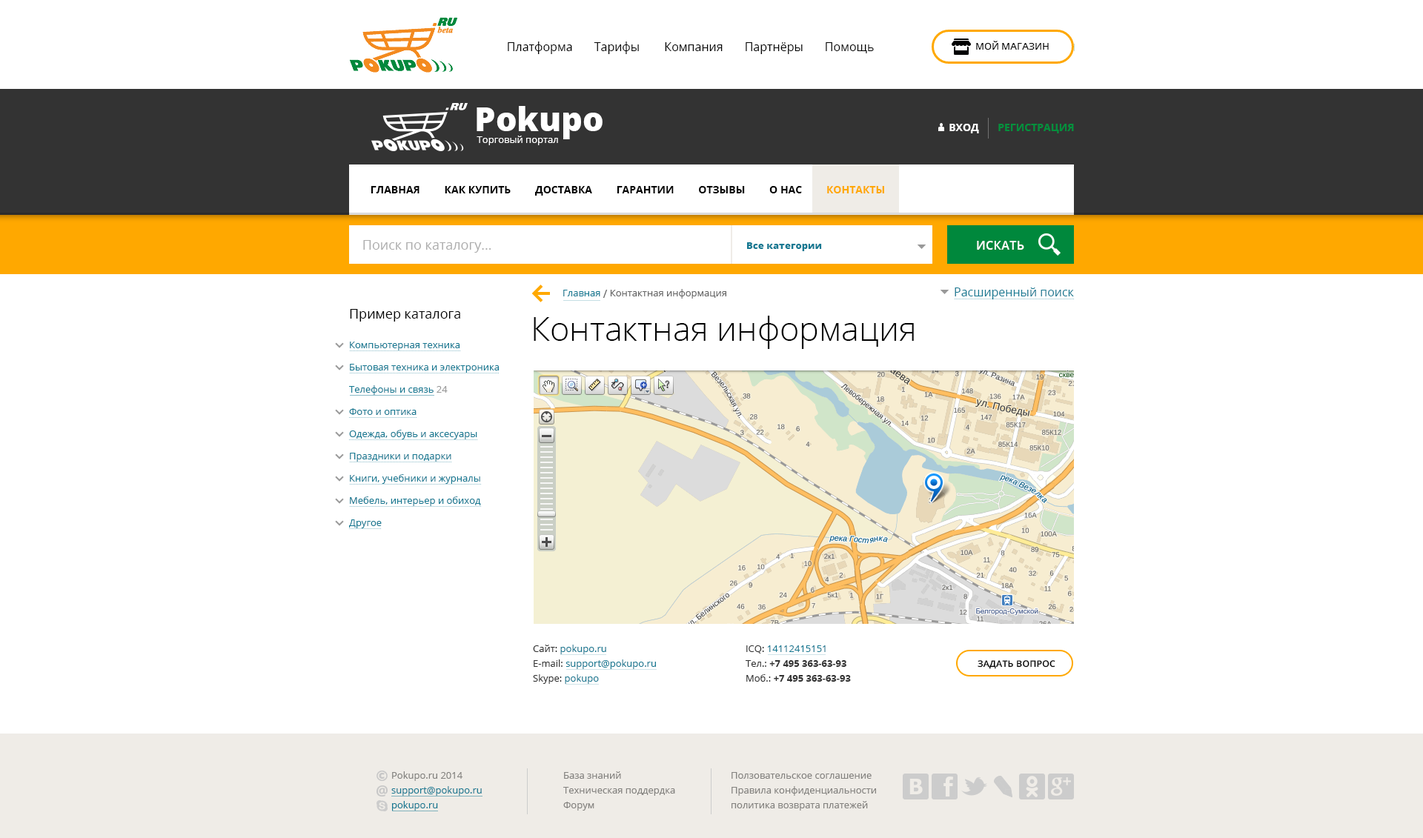
<style>
.page{position:relative;width:1423px;height:838px;background:#ffffff}
.page>*{position:absolute;margin:0}
.t1{font:11.9px "OpenSans";color:#010101}
.t2{font:9.6px "OpenSans";color:#ffffff}
.t3{font:33.3px "OpenSans-Extrabold";color:#ffffff}
.t4{font:10.4px "OpenSans-Bold";color:#02903d;text-transform:uppercase}
.t5{font:10.4px "OpenSans-Bold";color:#ffffff;text-transform:uppercase}
.t6{font:10.4px "OpenSans-Bold";color:#000000;text-transform:uppercase}
.t7{font:10.4px "OpenSans-Bold";color:#ffa800;text-transform:uppercase}
.t8{font:13.3px "OpenSans";color:#adadad}
.t9{font:9.6px "OpenSans-Extrabold";color:#177a93}
.t10{font:11.9px "OpenSans-Semibold";letter-spacing:0.025em;color:#ffffff;text-transform:uppercase}
.t11{font:9.6px "OpenSans";color:#666666}
.t12{font:9.6px "OpenSans";color:#177a93}
.t13{font:11.1px "OpenSans";color:#666666}
.t14{font:11.9px "OpenSans";color:#177a93}
.t15{font:13.3px "OpenSans";color:#000000}
.t16{font:33.3px "OpenSans-Light";color:#000000}
.t17{font:9.6px/22.2px "OpenSans";color:#177a93}
.t18{font:9.6px/22.2px "OpenSans";color:#999999}
.t19{font:9.6px/14.8px "OpenSans";color:#177a93}
.t20{font:9.6px/14.8px "OpenSans";color:#333333}
.t21{font:9.6px/14.8px "OpenSans-Bold";color:#333333}
.t22{font:8.9px "OpenSans-Semibold";letter-spacing:0.025em;color:#000000;text-transform:uppercase}
</style>
<div class="page">
<p class="t1" style="left:508px;top:41px;width:366px;height:13px">Платформа       Тарифы        Компания       Партнёры       Помощь</p>
<p class="t2" style="left:476px;top:106px;width:126px;height:39px"><span class="t3">Pokupo<br> </span>Торговый портал</p>
<p class="t4" style="left:949px;top:124px;width:125px;height:9px"><span class="t5">Вход       </span>регистрация</p>
<p class="t6" style="left:371px;top:186px;width:513px;height:10px">ГЛАВНАЯ         Как купить         Доставка         Гарантии         Отзывы         О нас         <span class="t7">Контакты</span></p>
<p class="t8" style="left:363px;top:240px;width:128px;height:13px">Поиск по каталогу...</p>
<p class="t9" style="left:747px;top:242px;width:75px;height:9px">Все категории</p>
<p class="t10" style="left:977px;top:241px;width:47px;height:9px">искать</p>
<p class="t11" style="left:563px;top:289px;width:163px;height:10px"><span class="t12">Главная </span><span class="t13">/</span> Контактная информация</p>
<p class="t14" style="left:954px;top:288px;width:120px;height:11px">Расширенный поиск</p>
<p class="t15" style="left:350px;top:309px;width:110px;height:13px">Пример каталога</p>
<p class="t16" style="left:534px;top:316px;width:380px;height:33px">Контактная информация</p>
<p class="t17" style="left:349px;top:342px;width:150px;height:186px">Компьютерная техника<br>Бытовая техника и электроника<br>Телефоны и связь<span class="t18"> 24<br></span>Фото и оптика<br>Одежда, обувь и аксесуары<br>Праздники и подарки<br>Книги, учебники и журналы<br>Мебель, интерьер и обиход<br>Другое</p>
<p class="t19" style="left:533px;top:645px;width:123px;height:39px"><span class="t20">Сайт: </span>pokupo.ru<br><span class="t20">E-mail: </span>support@pokupo.ru<br><span class="t20">Skype: </span>pokupo</p>
<p class="t21" style="left:745px;top:645px;width:106px;height:37px"><span class="t20">ICQ: </span><span class="t19">14112415151<br></span><span class="t20">Тел.: </span>+7 495 363-63-93<br><span class="t20">Моб.: </span>+7 495 363-63-93</p>
<p class="t22" style="left:977px;top:660px;width:78px;height:9px">задать вопрос</p>
</div>
